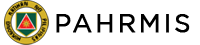
<style>
.page{position:relative;width:200px;height:45px;background:#ffffff}
.page>*{position:absolute;margin:0}
.t1{font:25px "Gotham-Book";letter-spacing:0.1em;color:#000000;font-weight:bold}
</style>
<div class="page">
<p class="t1" style="left:56px;top:14px;width:134px;height:19px">PAHRMIS</p>
</div>
